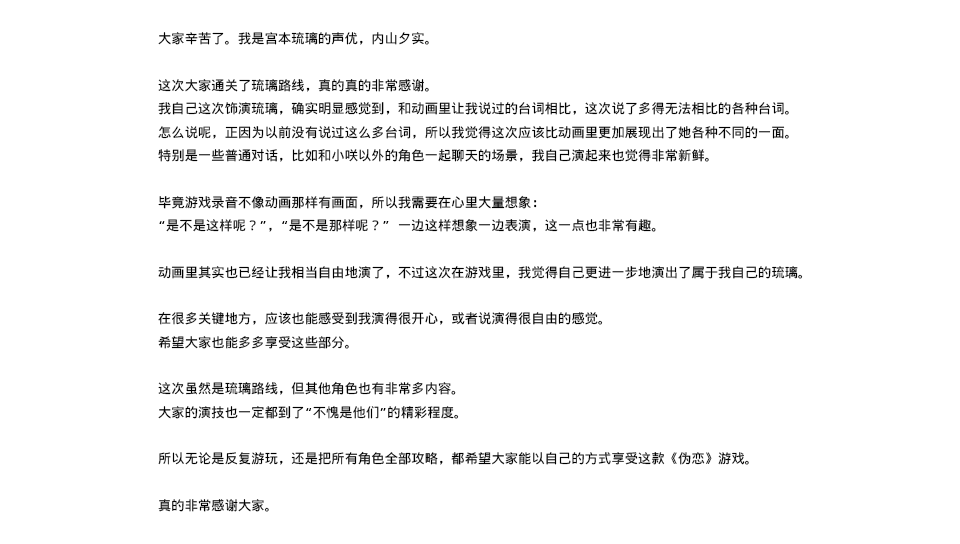
<style>
.page{position:relative;width:960px;height:544px;background:#ffffff}
.page>*{position:absolute;margin:0}
.t1{font:13.3px "WenQuanYiMicroHeiMono";color:#000000}
</style>
<div class="page">
<p class="t1" style="left:158px;top:32px;width:645px;height:480px">大家辛苦了。我是宫本琉璃的声优，内山夕实。<br><br>这次大家通关了琉璃路线，真的真的非常感谢。<br>我自己这次饰演琉璃，确实明显感觉到，和动画里让我说过的台词相比，这次说了多得无法相比的各种台词。<br>怎么说呢，正因为以前没有说过这么多台词，所以我觉得这次应该比动画里更加展现出了她各种不同的一面。<br>特别是一些普通对话，比如和小咲以外的角色一起聊天的场景，我自己演起来也觉得非常新鲜。<br><br>毕竟游戏录音不像动画那样有画面，所以我需要在心里大量想象：<br>“是不是这样呢？”，“是不是那样呢？” 一边这样想象一边表演，这一点也非常有趣。<br><br>动画里其实也已经让我相当自由地演了，不过这次在游戏里，我觉得自己更进一步地演出了属于我自己的琉璃。<br><br>在很多关键地方，应该也能感受到我演得很开心，或者说演得很自由的感觉。<br>希望大家也能多多享受这些部分。<br><br>这次虽然是琉璃路线，但其他角色也有非常多内容。<br>大家的演技也一定都到了“不愧是他们”的精彩程度。<br><br>所以无论是反复游玩，还是把所有角色全部攻略，都希望大家能以自己的方式享受这款《伪恋》游戏。<br><br>真的非常感谢大家。</p>
</div>
